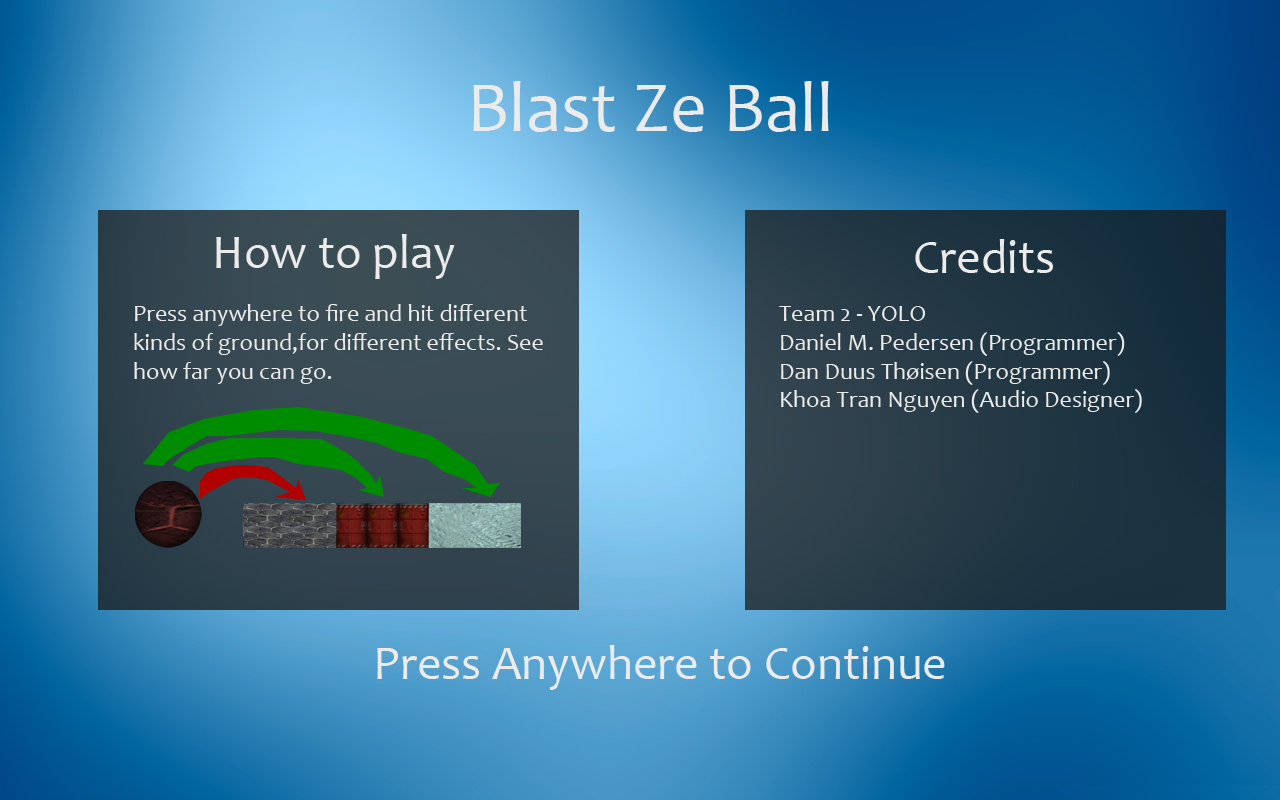
<style>
.page{position:relative;width:1280px;height:800px}
.page>*{position:absolute;margin:0}
.t1{font:72px "Candara";color:#ebebeb}
.t2{font:48px "Candara";color:#ebebeb}
.t3{font:24px "Candara";color:#ebebeb}
</style>
<div class="page">
<p class="t1" style="left:473px;top:81px;width:356px;height:51px">Blast Ze Ball</p>
<p class="t2" style="left:216px;top:234px;width:239px;height:45px">How to play</p>
<p class="t2" style="left:915px;top:239px;width:138px;height:34px">Credits</p>
<p class="t3" style="left:134px;top:304px;width:409px;height:80px">Press anywhere to fire and hit different<br>kinds of ground,for different effects. See<br>how far you can go.</p>
<p class="t3" style="left:779px;top:306px;width:363px;height:107px">Team 2 - YOLO<br>Daniel M. Pedersen (Programmer)<br>Dan Duus Thøisen (Programmer)<br>Khoa Tran Nguyen (Audio Designer)</p>
<p class="t2" style="left:377px;top:645px;width:568px;height:45px">Press Anywhere to Continue</p>
</div>
